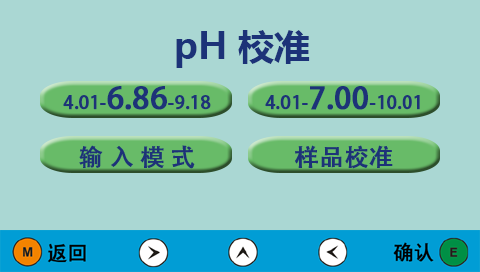
<style>
.page{position:relative;width:480px;height:272px;background:#aad7d3}
.page>*{position:absolute;margin:0}
.t1{font:36px "MicrosoftYaHeiUI-Bold";color:#1d3278}
.t2{font:18px "AdobeHeitiStd-Regular";color:#1d3278;font-weight:bold}
.t3{font:30px "AdobeHeitiStd-Regular";color:#1d3278;font-weight:bold}
.t4{font:24px "AdobeHeitiStd-Regular";color:#1d3278;font-weight:bold}
</style>
<div class="page">
<p class="t1" style="left:176px;top:30px;width:134px;height:38px">pH 校准</p>
<p class="t2" style="left:63px;top:86px;width:148px;height:24px">4.01-<span class="t3">6.86</span>-9.18</p>
<p class="t2" style="left:265px;top:86px;width:155px;height:24px">4.01-<span class="t3">7.00</span>-10.01</p>
<p class="t4" style="left:79px;top:145px;width:116px;height:24px">输 入 模 式</p>
<p class="t4" style="left:295px;top:145px;width:98px;height:24px">样品校准</p>
</div>
